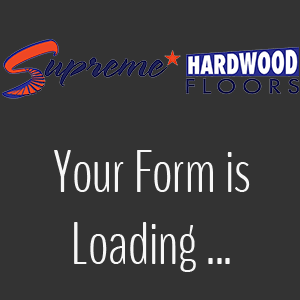
<style>
.page{position:relative;width:300px;height:300px;background:#333333}
.page>*{position:absolute;margin:0}
.t1{font:60px "BenchNine-Light";color:#f7f7f7}
</style>
<div class="page">
<p class="t1" style="left:54px;top:150px;width:196px;height:122px;text-align:center">Your Form is Loading ...</p>
</div>
